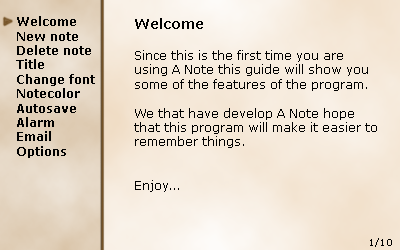
<style>
.page{position:relative;width:400px;height:250px}
.page>*{position:absolute;margin:0}
.t1{font:12px "Verdana-Bold";color:#010101}
.t2{font:12px "Verdana";color:#000000}
.t3{font:14px "Verdana-Bold";color:#000000}
.t4{font:9px "Verdana";color:#000000}
</style>
<div class="page">
<p class="t1" style="left:16px;top:16px;width:79px;height:142px">Welcome<br>New note<br>Delete note<br>Title<br>Change font<br>Notecolor<br>Autosave<br>Alarm<br>Email<br>Options</p>
<p class="t2" style="left:134px;top:18px;width:243px;height:174px"><span class="t3">Welcome<br><br></span>Since this is the first time you are using A Note this guide will show you some of the features of the program.<br><br>We that have develop A Note hope that this program will make it easier to <br>remember things.<br><br><br>Enjoy...</p>
<p class="t4" style="left:370px;top:238px;width:22px;height:9px">1/10</p>
</div>
